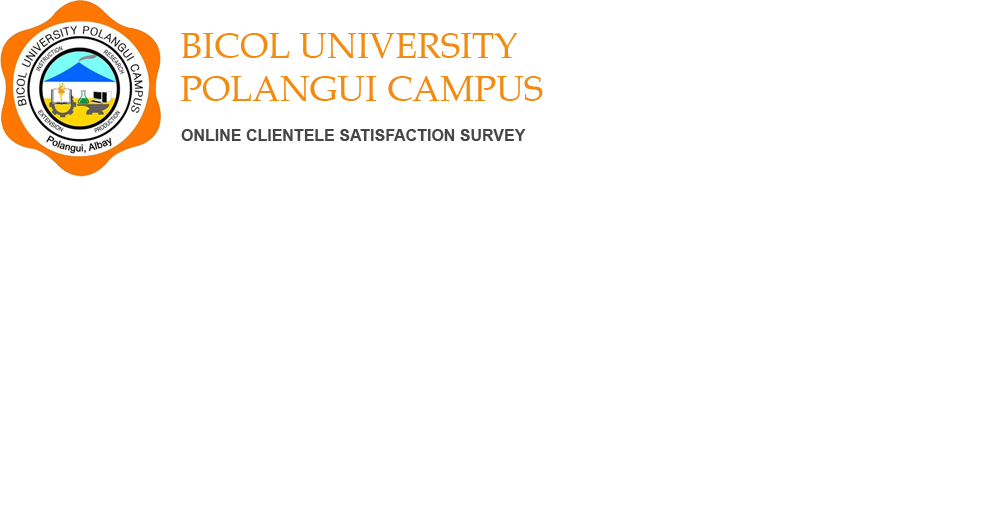
<style>
.page{position:relative;width:1000px;height:514px;background:#ffffff}
.page>*{position:absolute;margin:0}
.t1{font:36px "BookAntiqua";color:#f28b11}
.t2{font:16px "Arial-BoldMT";color:#464646}
</style>
<div class="page">
<p class="t1" style="left:180px;top:33px;width:363px;height:68px">BICOL UNIVERSITY<br>POLANGUI CAMPUS</p>
<p class="t2" style="left:181px;top:129px;width:345px;height:12px">ONLINE CLIENTELE SATISFACTION SURVEY</p>
</div>
